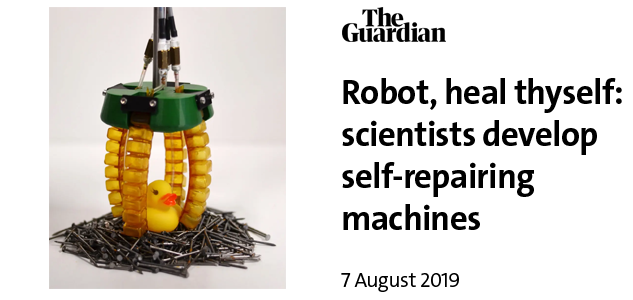
<style>
.page{position:relative;width:633px;height:300px;background:#ffffff}
.page>*{position:absolute;margin:0}
.t1{font:35px "V&ATheSansC6s-Bold";letter-spacing:-0.02em;color:#000000}
.t2{font:20.8px "V&ATheSansC6s-SemiLight";letter-spacing:-0.02em;color:#000000}
</style>
<div class="page">
<p class="t1" style="left:342px;top:78px;width:280px;height:152px">Robot, heal thyself:<br>scientists develop<br>self-repairing<br>machines</p>
<p class="t2" style="left:341px;top:273px;width:118px;height:19px">7 August 2019</p>
</div>
